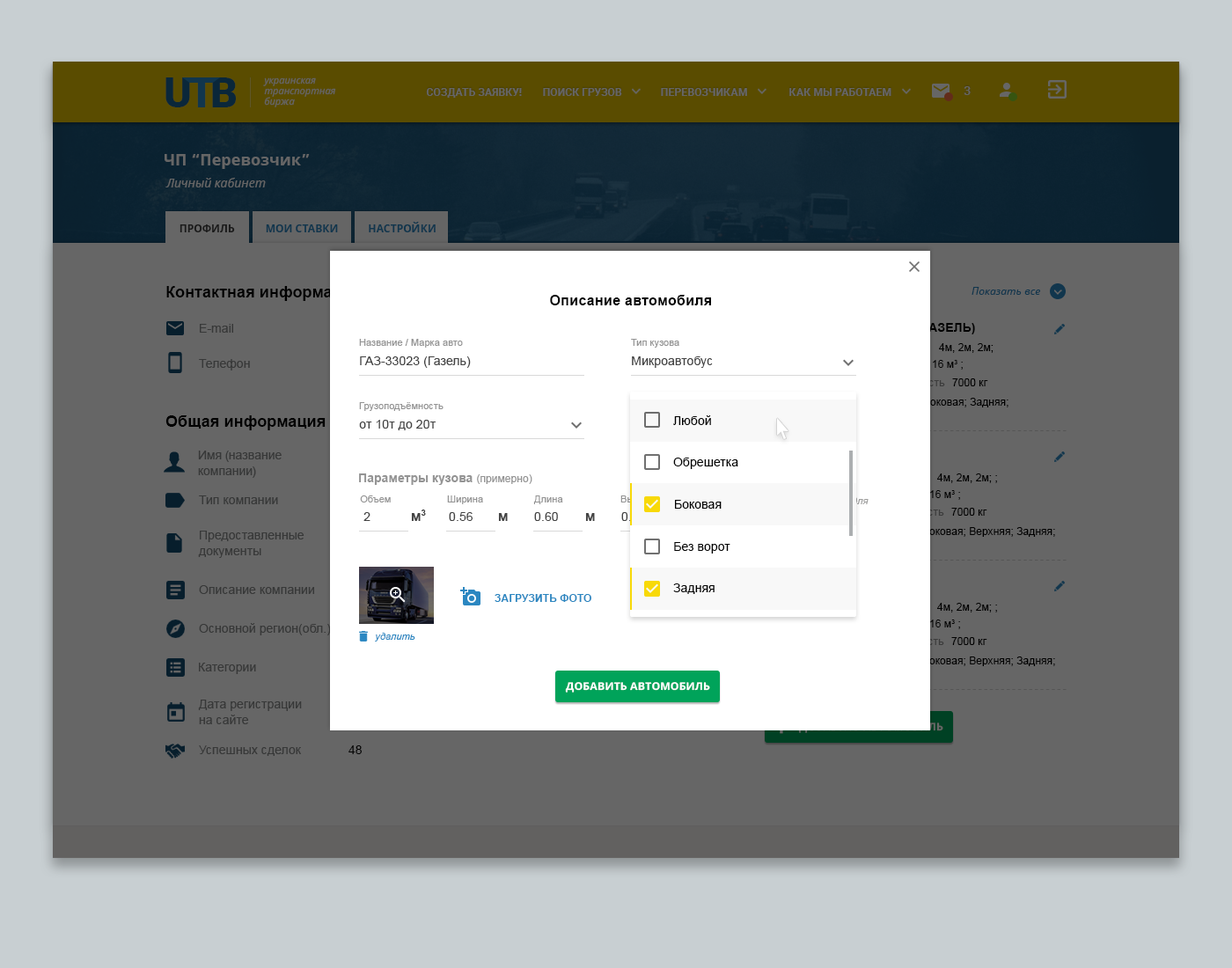
<style>
.page{position:relative;width:1232px;height:968px;background:#666666}
.page>*{position:absolute;margin:0}
.t1{font:41.9px "Roboto-Black";letter-spacing:-0.1em;color:#0a273a;text-transform:uppercase}
.t2{font:9.6px/10.5px "NotoSans-Italic";color:#666666}
.t3{font:10.6px "Roboto-Bold";letter-spacing:0.01em;color:#666666;text-transform:uppercase}
.t4{font:12.3px "Roboto-Medium";letter-spacing:0.01em;color:#666666}
.t5{font:15.8px "NotoSans-Bold";color:#666666}
.t6{font:12.3px "NotoSans-Italic";color:#666666}
.t7{font:10.6px "NotoSans-Bold";color:#11364d;text-transform:uppercase}
.t8{font:10.6px "NotoSans-Bold";color:#1a1a1a;text-transform:uppercase}
.t9{font:15.8px "Arial-BoldMT";letter-spacing:0.005em;color:#000000}
.t10{font:10.6px "NotoSans-Italic";letter-spacing:0.005em;color:#11364d}
.t11{font:14.1px "Arial-BoldMT";letter-spacing:0.005em;color:#000000}
.t12{font:12.3px "ArialMT";letter-spacing:0.005em;color:#373838}
.t13{font:9.6px "ArialMT";letter-spacing:0.005em;color:#949494}
.t14{font:10.6px "ArialMT";letter-spacing:0.005em;color:#000000}
.t15{font:12.3px "ArialMT";letter-spacing:0.005em;color:#424242}
.t16{font:12.3px "ArialMT";letter-spacing:0.005em;color:#000000}
.t17{font:12.3px/15.8px "ArialMT";letter-spacing:-0.005em;color:#373838}
.t18{font:12.3px "Arial-BoldMT";letter-spacing:0.005em;color:#949494}
.t19{font:10.6px "ArialMT";letter-spacing:0.005em;color:#949494}
.t20{font:9.7px "ArialMT";letter-spacing:0.005em;color:#949494}
.t21{font:9.7px "ArialMT";letter-spacing:0.005em}
.t22{font:14.1px "Arial-BoldMT";letter-spacing:0.005em;color:#434343}
.t23{font:12.3px "ArialMT";letter-spacing:0.005em}
.t24{font:12.3px/42.2px "ArialMT";letter-spacing:0.005em;color:#373838}
.t25{font:12.3px/15.8px "ArialMT";letter-spacing:0.005em;color:#373838}
.t26{font:10.5px "Arial-BoldMT";letter-spacing:0.005em;color:#2b87c1;text-transform:uppercase}
.t27{font:9.7px "Arial-ItalicMT";letter-spacing:0.005em;color:#2b87c1}
.t28{font:10.6px "NotoSans-Bold";letter-spacing:0.005em;color:#ffffff;text-transform:uppercase}
.t29{font:12.3px/12.3px "ArialMT";letter-spacing:0.005em;color:#373838}
</style>
<div class="page">
<p class="t1" style="left:165px;top:77px;width:71px;height:30px">utb</p>
<p class="t2" style="left:263px;top:77px;width:73px;height:30px">украинская <br>транспортная <br>биржа</p>
<p class="t3" style="left:426px;top:88px;width:96px;height:10px">создать заявку!</p>
<p class="t3" style="left:543px;top:88px;width:79px;height:8px">поиск грузов</p>
<p class="t3" style="left:661px;top:88px;width:230px;height:8px">перевозчикам               как мы работаем</p>
<p class="t4" style="left:964px;top:86px;width:7px;height:9px">3</p>
<p class="t5" style="left:165px;top:154px;width:145px;height:15px">ЧП “Перевозчик”</p>
<p class="t6" style="left:165px;top:178px;width:101px;height:9px">Личный кабинет</p>
<p class="t7" style="left:369px;top:222px;width:67px;height:10px">настройки</p>
<p class="t8" style="left:180px;top:224px;width:55px;height:8px">Профиль</p>
<p class="t7" style="left:266px;top:224px;width:72px;height:8px">мои ставки</p>
<p class="t9" style="left:166px;top:286px;width:195px;height:15px">Контактная информация</p>
<p class="t10" style="left:971px;top:287px;width:69px;height:8px">Показать все</p>
<p class="t11" style="left:550px;top:295px;width:161px;height:10px">Описание автомобиля</p>
<p class="t12" style="left:200px;top:324px;width:33px;height:9px">E-mail</p>
<p class="t13" style="left:359px;top:339px;width:104px;height:9px">Название / Марка авто</p>
<p class="t13" style="left:631px;top:339px;width:48px;height:9px">Тип кузова</p>
<p class="t14" style="left:939px;top:343px;width:54px;height:10px">4м, 2м, 2м;</p>
<p class="t12" style="left:199px;top:359px;width:51px;height:11px">Телефон</p>
<p class="t15" style="left:360px;top:356px;width:111px;height:12px">ГАЗ-33023 (Газель)</p>
<p class="t15" style="left:632px;top:356px;width:81px;height:12px">Микроавтобус</p>
<p class="t14" style="left:933px;top:360px;width:30px;height:10px">16 м3 ;</p>
<p class="t14" style="left:952px;top:378px;width:36px;height:8px">7000 кг</p>
<p class="t14" style="left:923px;top:398px;width:85px;height:9px">Боковая; Задняя;</p>
<p class="t13" style="left:359px;top:402px;width:84px;height:9px">Грузоподъёмность</p>
<p class="t9" style="left:165px;top:415px;width:161px;height:15px">Общая информация</p>
<p class="t15" style="left:359px;top:420px;width:77px;height:10px">от 10т до 20т</p>
<p class="t16" style="left:673px;top:415px;width:38px;height:10px">Любой</p>
<p class="t17" style="left:198px;top:451px;width:84px;height:27px">Имя (название <br>компании)</p>
<p class="t16" style="left:673px;top:458px;width:65px;height:11px">Обрешетка</p>
<p class="t18" style="left:359px;top:473px;width:173px;height:12px">Параметры кузова <span class="t19">(примерно)</span></p>
<p class="t14" style="left:937px;top:473px;width:60px;height:10px">4м, 2м, 2м; ;</p>
<p class="t12" style="left:199px;top:495px;width:79px;height:9px">Тип компании</p>
<p class="t20" style="left:360px;top:495px;width:31px;height:7px">Объем</p>
<p class="t20" style="left:447px;top:495px;width:36px;height:9px">Ширина</p>
<p class="t20" style="left:533px;top:495px;width:30px;height:9px">Длина</p>
<p class="t21" style="left:620px;top:495px;width:34px;height:7px">Высота</p>
<p class="t14" style="left:930px;top:490px;width:30px;height:10px">16 м3 ;</p>
<p class="t22" style="left:411px;top:509px;width:15px;height:12px">м3</p>
<p class="t16" style="left:675px;top:500px;width:47px;height:9px">Боковая</p>
<p class="t14" style="left:951px;top:508px;width:36px;height:8px">7000 кг</p>
<p class="t15" style="left:363px;top:512px;width:7px;height:9px">2</p>
<p class="t15" style="left:449px;top:512px;width:24px;height:9px">0.56</p>
<p class="t22" style="left:498px;top:513px;width:10px;height:8px">м</p>
<p class="t15" style="left:534px;top:512px;width:24px;height:9px">0.60</p>
<p class="t22" style="left:585px;top:513px;width:10px;height:8px">м</p>
<p class="t23" style="left:621px;top:512px;width:24px;height:9px">0.85</p>
<p class="t24" style="left:198px;top:531px;width:106px;height:27px">Предоставленные<br><span class="t25">документы</span></p>
<p class="t14" style="left:922px;top:527px;width:133px;height:10px">Боковая; Верхняя; Задняя;</p>
<p class="t16" style="left:674px;top:542px;width:56px;height:11px">Без ворот</p>
<p class="t12" style="left:199px;top:585px;width:115px;height:9px">Описание компании</p>
<p class="t26" style="left:495px;top:594px;width:96px;height:8px">Загрузить фото</p>
<p class="t16" style="left:673px;top:583px;width:42px;height:11px">Задняя</p>
<p class="t14" style="left:937px;top:603px;width:60px;height:9px">4м, 2м, 2м; ;</p>
<p class="t12" style="left:199px;top:623px;width:132px;height:12px">Основной регион(обл.)</p>
<p class="t14" style="left:930px;top:619px;width:30px;height:10px">16 м3 ;</p>
<p class="t27" style="left:375px;top:633px;width:40px;height:8px">удалить</p>
<p class="t14" style="left:951px;top:637px;width:36px;height:8px">7000 кг</p>
<p class="t12" style="left:199px;top:663px;width:57px;height:11px">Категории</p>
<p class="t14" style="left:922px;top:656px;width:133px;height:10px">Боковая; Верхняя; Задняя;</p>
<p class="t28" style="left:565px;top:682px;width:145px;height:11px">добавить автомобиль</p>
<p class="t29" style="left:198px;top:700px;width:104px;height:24px">Дата регистрации <br><span class="t25">на сайте</span></p>
<p class="t28" style="left:798px;top:722px;width:145px;height:11px">Добавить автомобиль</p>
<p class="t12" style="left:199px;top:745px;width:102px;height:11px">Успешных сделок</p>
<p class="t16" style="left:348px;top:745px;width:14px;height:9px">48</p>
</div>
